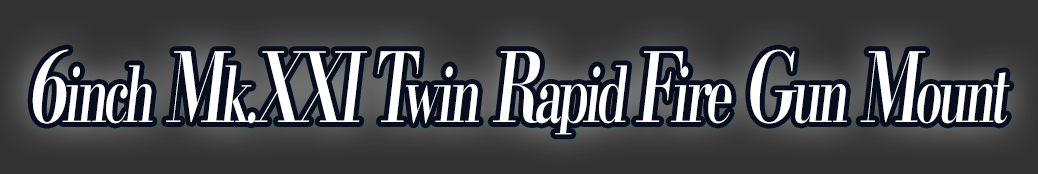
<style>
.page{position:relative;width:1038px;height:174px;background:#333333}
.page>*{position:absolute;margin:0}
.t1{font:96px "KochoStd-Heavy";letter-spacing:-0.08em;color:#ffffff;font-style:italic;scale:0.65 1}
.t2{font:76.8px "KochoStd-Heavy";letter-spacing:-0.08em;color:#ffffff;font-style:italic;scale:0.65 1}
</style>
<div class="page">
<p class="t1" style="left:32px;top:49px;width:978px;height:86px">6<span class="t2">inch</span> M<span class="t2">k.</span>XXI T<span class="t2">win</span> R<span class="t2">apid </span>F<span class="t2">ire</span> G<span class="t2">un</span> M<span class="t2">ount</span></p>
</div>
